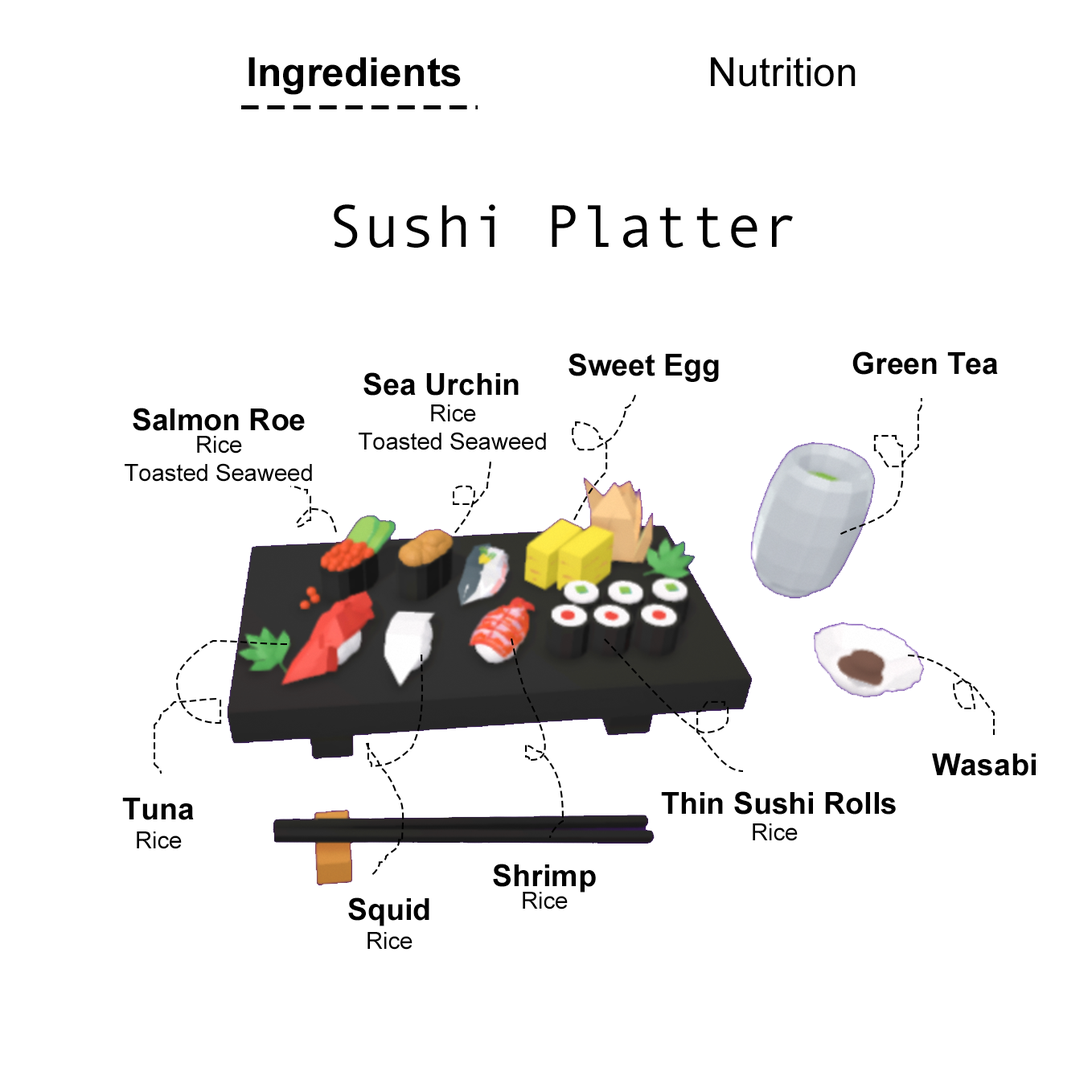
<style>
.page{position:relative;width:1092px;height:1092px;background:#ffffff}
.page>*{position:absolute;margin:0}
.t1{font:40.2px "Arial-BoldMT";color:#000000}
.t2{font:40.2px "ArialMT";color:#000000}
.t3{font:60.3px "AndaleMono";color:#000000}
.t4{font:30.2px "Arial-BoldMT";color:#000000}
.t5{font:23.5px "ArialMT";color:#000000}
</style>
<div class="page">
<p class="t1" style="left:248px;top:57px;width:213px;height:38px">Ingredients</p>
<p class="t2" style="left:711px;top:57px;width:145px;height:30px">Nutrition</p>
<p class="t3" style="left:334px;top:204px;width:459px;height:44px">Sushi Platter</p>
<p class="t4" style="left:569px;top:353px;width:150px;height:29px">Sweet Egg</p>
<p class="t4" style="left:852px;top:351px;width:146px;height:24px">Green Tea</p>
<p class="t4" style="left:363px;top:372px;width:156px;height:24px">Sea Urchin</p>
<p class="t4" style="left:133px;top:408px;width:172px;height:23px">Salmon Roe</p>
<p class="t5" style="left:431px;top:404px;width:45px;height:18px">Rice</p>
<p class="t5" style="left:197px;top:436px;width:45px;height:18px">Rice</p>
<p class="t5" style="left:359px;top:432px;width:187px;height:18px">Toasted Seaweed</p>
<p class="t5" style="left:125px;top:463px;width:187px;height:19px">Toasted Seaweed</p>
<p class="t4" style="left:932px;top:753px;width:104px;height:23px">Wasabi</p>
<p class="t4" style="left:122px;top:798px;width:72px;height:22px">Tuna</p>
<p class="t4" style="left:661px;top:791px;width:235px;height:24px">Thin Sushi Rolls</p>
<p class="t5" style="left:137px;top:831px;width:45px;height:18px">Rice</p>
<p class="t5" style="left:753px;top:823px;width:45px;height:18px">Rice</p>
<p class="t4" style="left:493px;top:864px;width:103px;height:29px">Shrimp</p>
<p class="t5" style="left:523px;top:892px;width:45px;height:17px">Rice</p>
<p class="t4" style="left:348px;top:897px;width:81px;height:29px">Squid</p>
<p class="t5" style="left:367px;top:932px;width:46px;height:18px">Rice</p>
</div>
